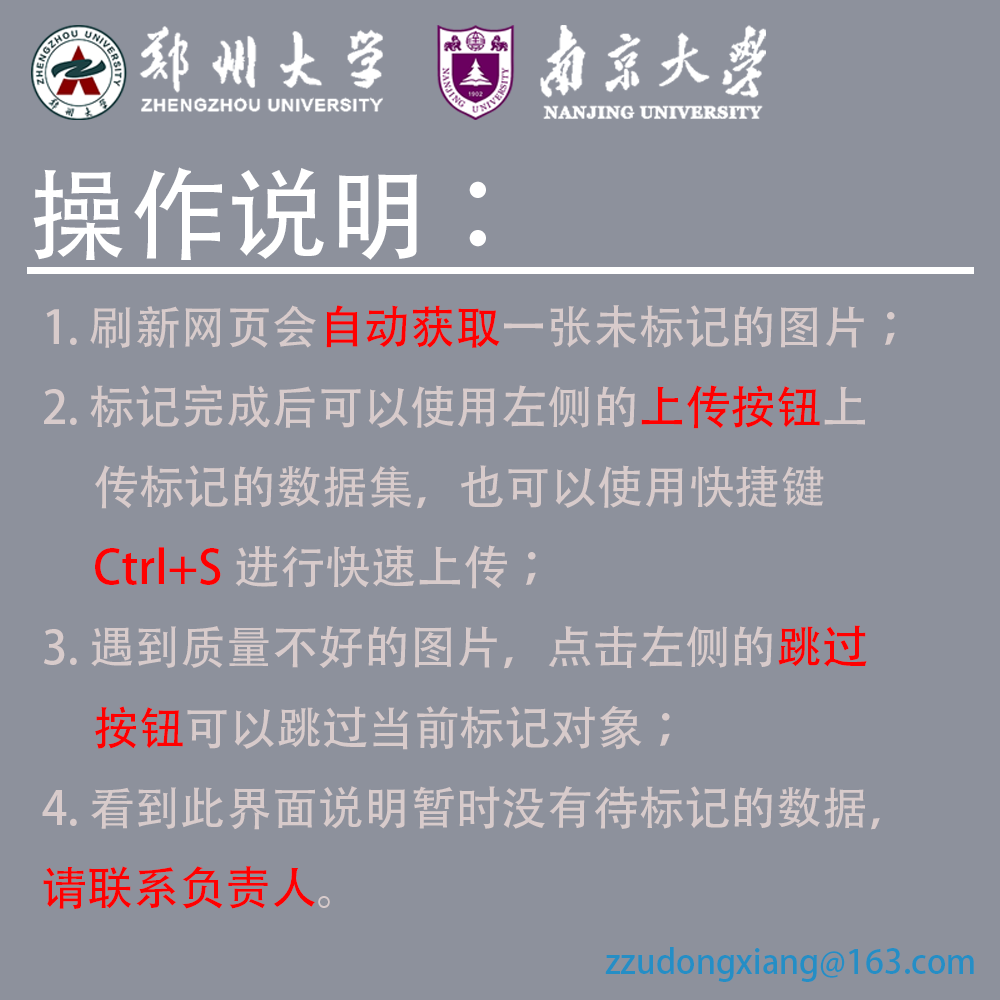
<style>
.page{position:relative;width:1000px;height:1000px;background:#8d919c}
.page>*{position:absolute;margin:0}
.t1{font:100px "AdobeHeitiStd-Regular";color:#ffffff}
.t2{font:45.8px "AdobeHeitiStd-Regular";color:#d8cbcb}
.t3{font:45.8px "AdobeHeitiStd-Regular";color:#ff0000}
.t4{font:33.3px "AdobeHeitiStd-Regular";color:#258ec5}
</style>
<div class="page">
<p class="t1" style="left:33px;top:167px;width:453px;height:93px">操作说明：</p>
<p class="t2" style="left:42px;top:305px;width:853px;height:604px">1. 刷新网页会<span class="t3">自动获取</span>一张未标记的图片；<br>2. 标记完成后可以使用左侧的<span class="t3">上传按钮</span>上<br>     传标记的数据集，也可以使用快捷键<br>     <span class="t3">Ctrl+S</span>进行快速上传；<br>3. 遇到质量不好的图片，点击左侧的<span class="t3">跳过<br>     按钮</span>可以跳过当前标记对象；<br>4. 看到此界面说明暂时没有待标记的数据，<br><span class="t3">请联系负责人</span>。</p>
<p class="t4" style="left:605px;top:947px;width:369px;height:35px">zzudongxiang@163.com</p>
</div>
